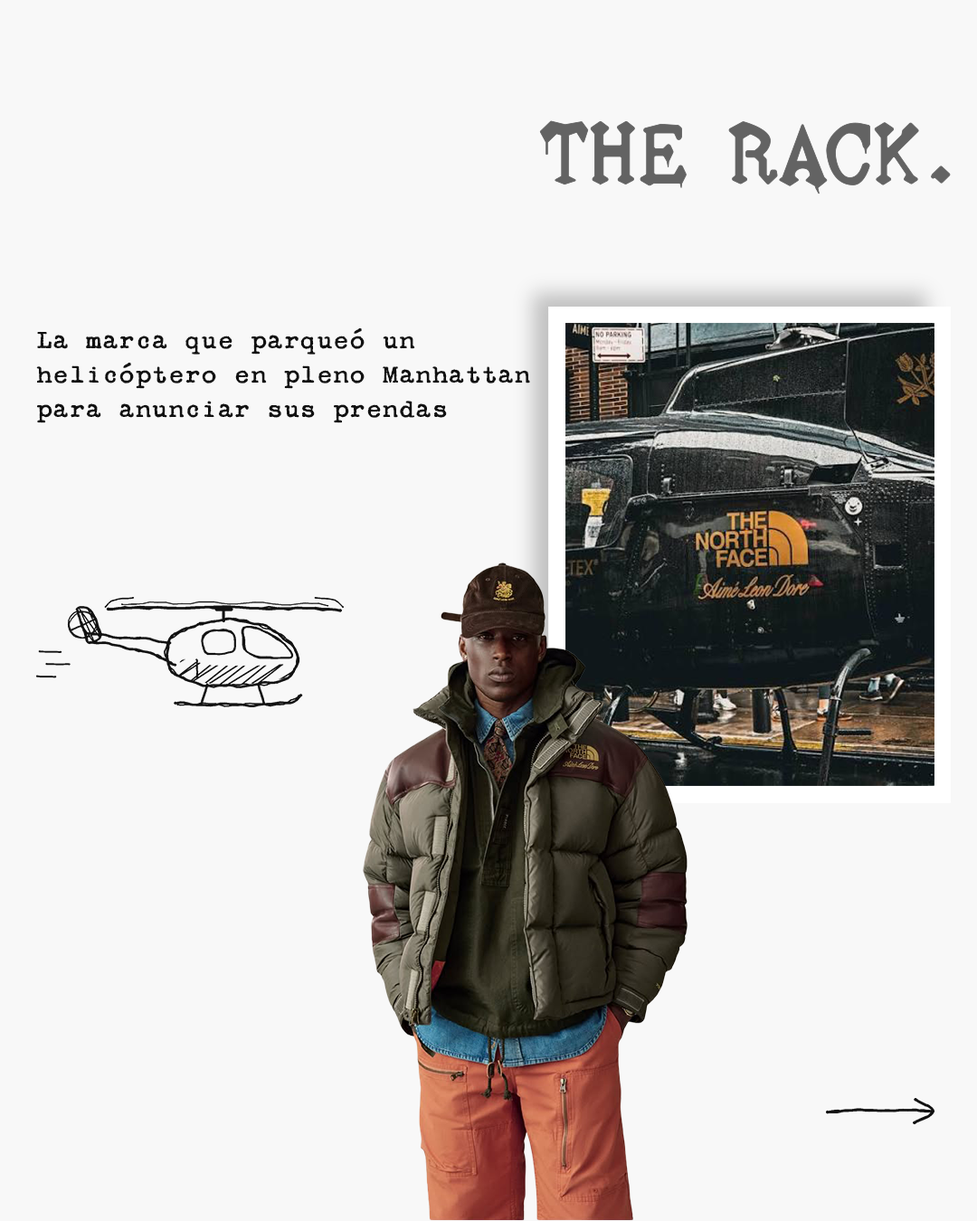
<style>
.page{position:relative;width:977px;height:1221px;background:#f8f8f8}
.page>*{position:absolute;margin:0}
.t1{font:28.1px/33.9px "SecretServiceTypewriterRR-Regular";color:#111111}
</style>
<div class="page">
<p class="t1" style="left:36px;top:327px;width:494px;height:96px">La marca que parqueó un<br>helicóptero en pleno Manhattan para anunciar sus prendas</p>
</div>
